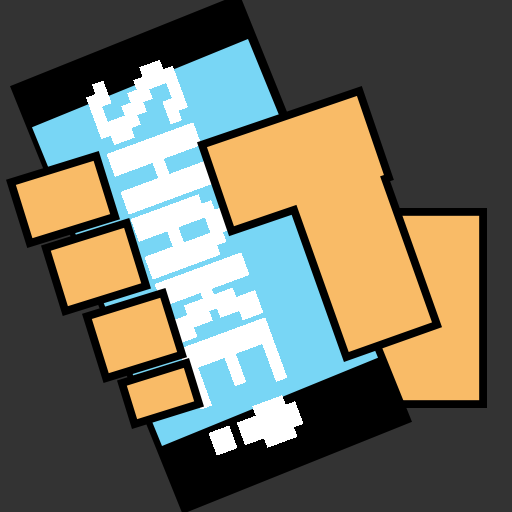
<style>
.page{position:relative;width:512px;height:512px;background:#333333}
.page>*{position:absolute;margin:0}
.t1{font:128.5px "Fixedsys";letter-spacing:-0.17em;color:#ffffff;text-transform:uppercase;font-weight:bold}
</style>
<div class="page">
<p class="t1" style="left:86px;top:60px;width:217px;height:395px;rotate:70deg">Shake!</p>
</div>
